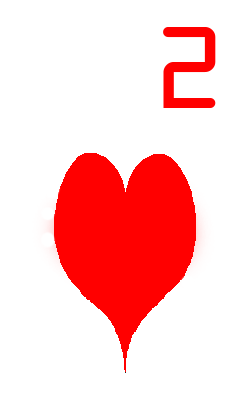
<style>
.page{position:relative;width:250px;height:400px;background:#ffffff}
.page>*{position:absolute;margin:0}
.t1{font:125px "OCRAExtended";color:#ff0000}
</style>
<div class="page">
<p class="t1" style="left:163px;top:27px;width:53px;height:81px">2</p>
</div>
